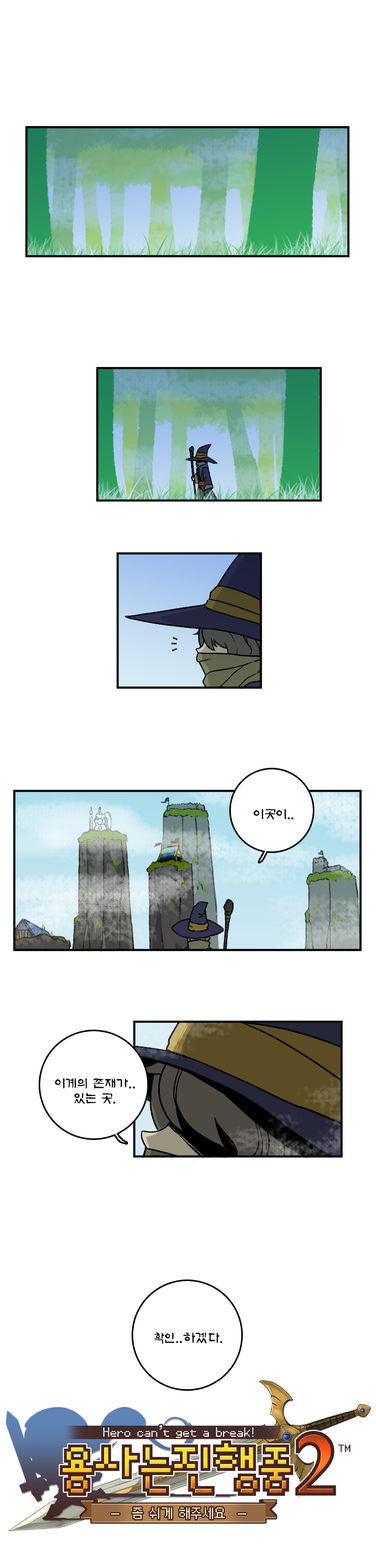
<style>
.page{position:relative;width:376px;height:1568px;background:#ffffff}
.page>*{position:absolute;margin:0}
.t1{font:12.5px "KoreanAS-R";color:#000000}
</style>
<div class="page">
<p class="t1" style="left:253px;top:809px;width:41px;height:11px">이곳이..</p>
<p class="t1" style="left:55px;top:1078px;width:80px;height:26px;text-align:center">이계의 존재가..<br>있는 곳.</p>
<p class="t1" style="left:154px;top:1332px;width:69px;height:12px">확인..하겠다.</p>
</div>
